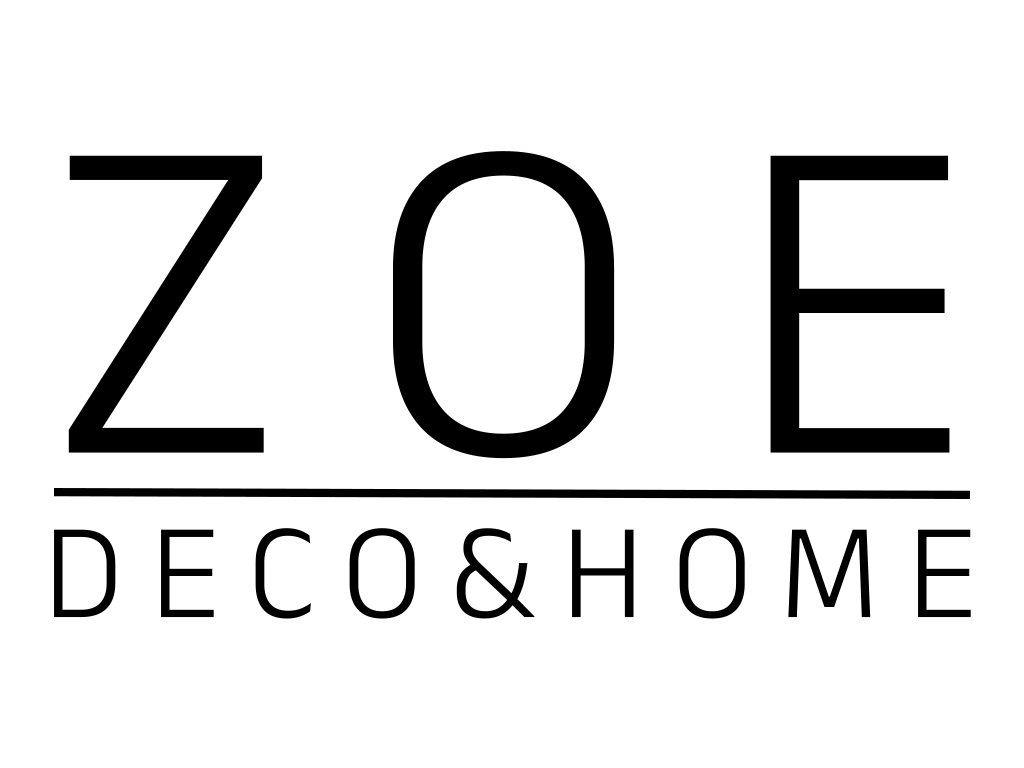
<style>
.page{position:relative;width:1024px;height:768px;background:#ffffff}
.page>*{position:absolute;margin:0}
.t1{font:136.6px "AnekDevanagari-Light";letter-spacing:0.2em;color:#000000}
.t2{font:464.4px "AnekDevanagari-Light";letter-spacing:0.2em;color:#000000}
</style>
<div class="page">
<p class="t1" style="left:54px;top:151px;width:917px;height:468px;text-align:center"><span class="t2">ZOE<br></span>DECO&amp;HOME</p>
</div>
